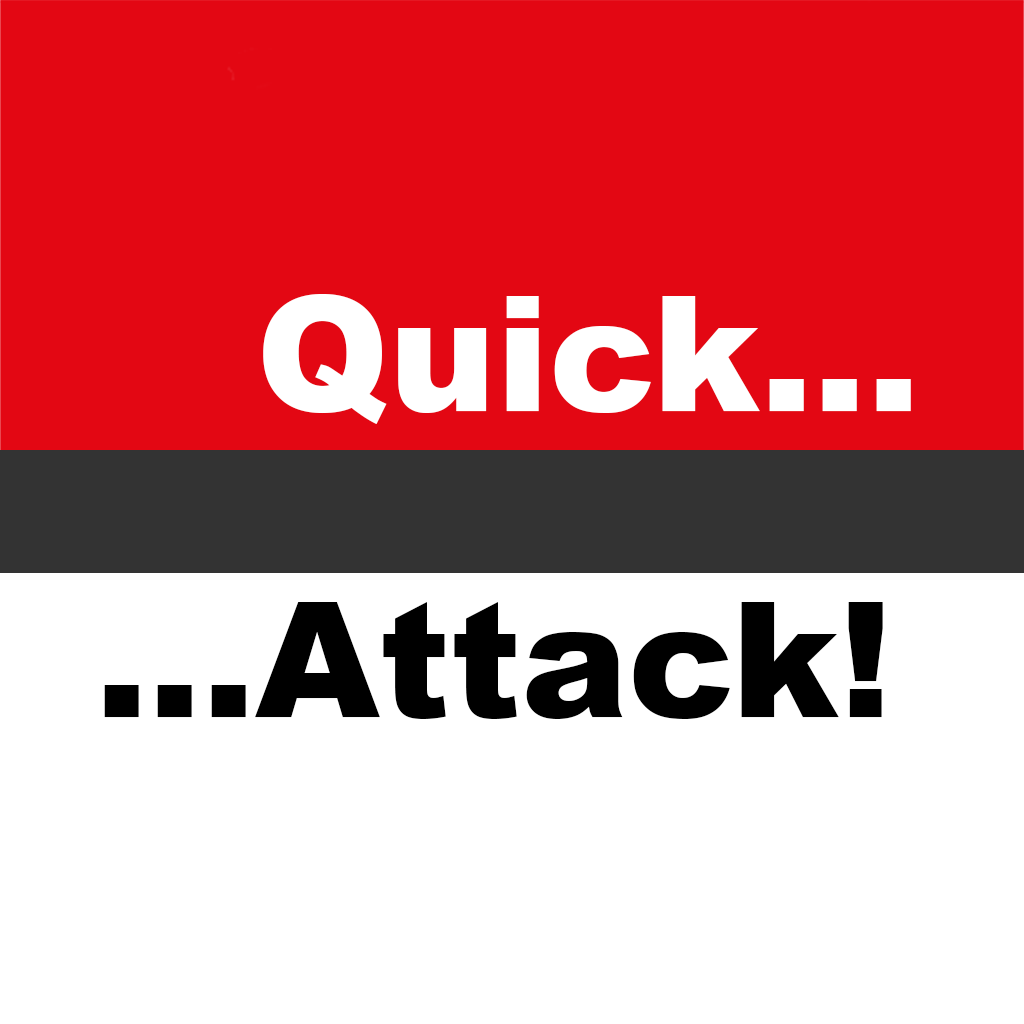
<style>
.page{position:relative;width:1024px;height:1024px;background:#ffffff}
.page>*{position:absolute;margin:0}
.t1{font:160px "Arial-Black";color:#ffffff}
.t2{font:160px "Arial-Black";color:#000000}
</style>
<div class="page">
<p class="t1" style="left:263px;top:294px;width:648px;height:130px">Quick...</p>
<p class="t2" style="left:104px;top:602px;width:779px;height:117px">...Attack!</p>
</div>
